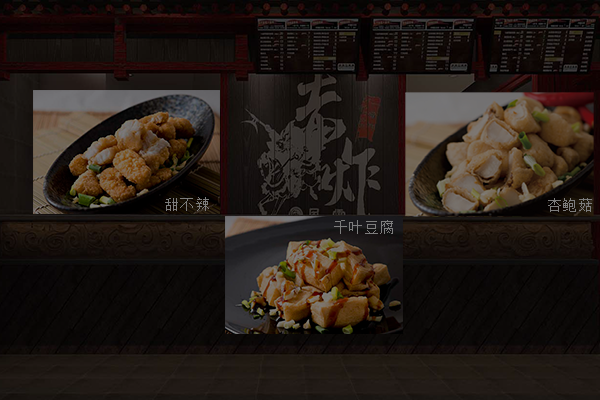
<style>
.page{position:relative;width:600px;height:400px}
.page>*{position:absolute;margin:0}
.t1{font:15.5px "SimSun";color:#7d7d7d}
</style>
<div class="page">
<p class="t1" style="left:165px;top:197px;width:44px;height:14px">甜不辣</p>
<p class="t1" style="left:548px;top:198px;width:44px;height:14px">杏鲍菇</p>
<p class="t1" style="left:334px;top:220px;width:59px;height:14px">千叶豆腐</p>
</div>
